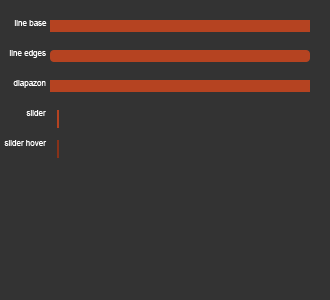
<style>
.page{position:relative;width:330px;height:300px;background:#333333}
.page>*{position:absolute;margin:0}
.t1{font:8px "ArialMT";color:#ffffff}
</style>
<div class="page">
<p class="t1" style="left:14px;top:20px;width:33px;height:6px">line base</p>
<p class="t1" style="left:9px;top:50px;width:37px;height:8px">line edges</p>
<p class="t1" style="left:13px;top:80px;width:33px;height:8px">diapazon</p>
<p class="t1" style="left:26px;top:110px;width:20px;height:6px">slider</p>
<p class="t1" style="left:4px;top:140px;width:43px;height:6px">slider hover</p>
</div>
